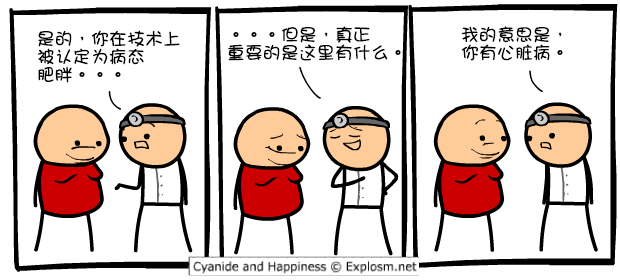
<style>
.page{position:relative;width:620px;height:280px;background:#ffffff}
.page>*{position:absolute;margin:0}
.t1{font:18px/18px "DFGirl";color:#000000}
</style>
<div class="page">
<p class="t1" style="left:38px;top:30px;width:142px;height:53px">是的，你在技术上<br>被认定为病态<br>肥胖。。。</p>
<p class="t1" style="left:228px;top:26px;width:173px;height:35px">。。。但是，真正<br>重要的是这里有什么。</p>
<p class="t1" style="left:461px;top:26px;width:102px;height:35px">我的意思是，<br>你有心脏病。</p>
</div>
